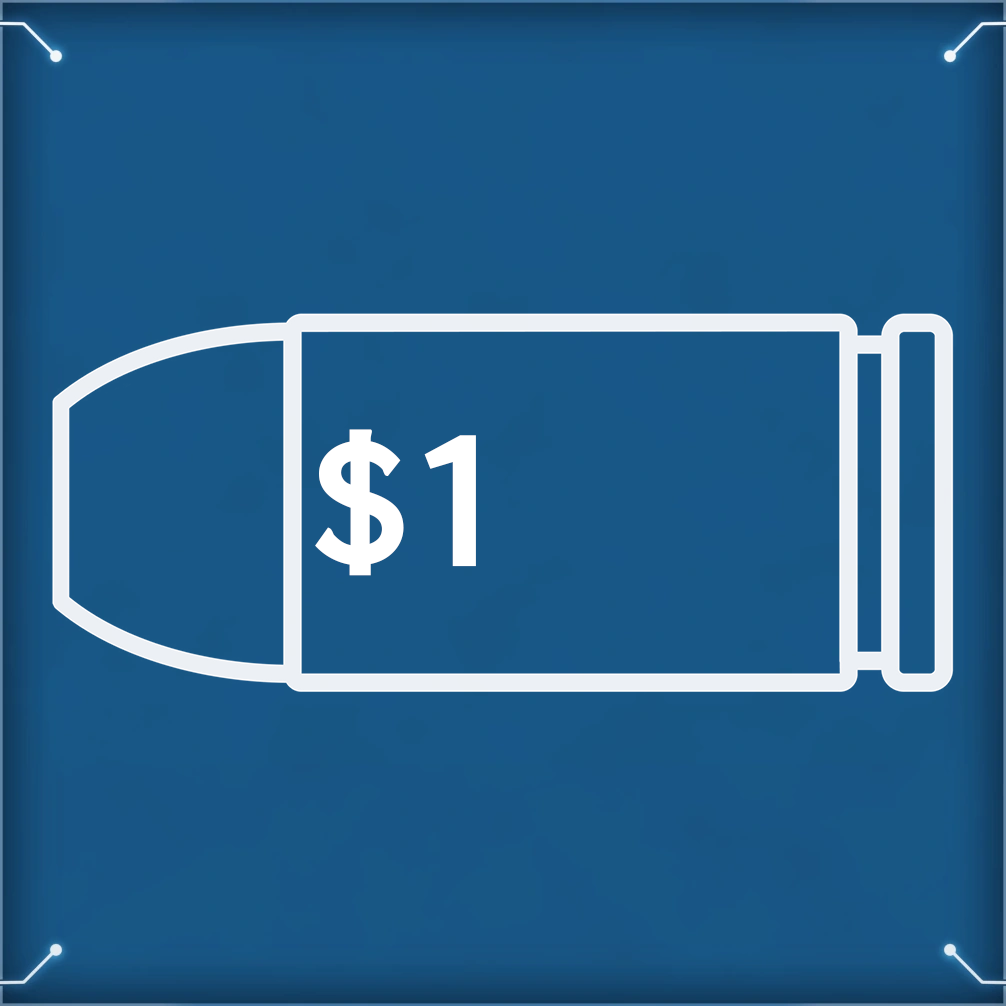
<style>
.page{position:relative;width:1006px;height:1006px;background:#185786}
.page>*{position:absolute;margin:0}
.t1{font:209.7px "Inconsolata-Bold";color:#ffffff}
</style>
<div class="page">
<p class="t1" style="left:315px;top:429px;width:161px;height:147px">$1</p>
</div>
